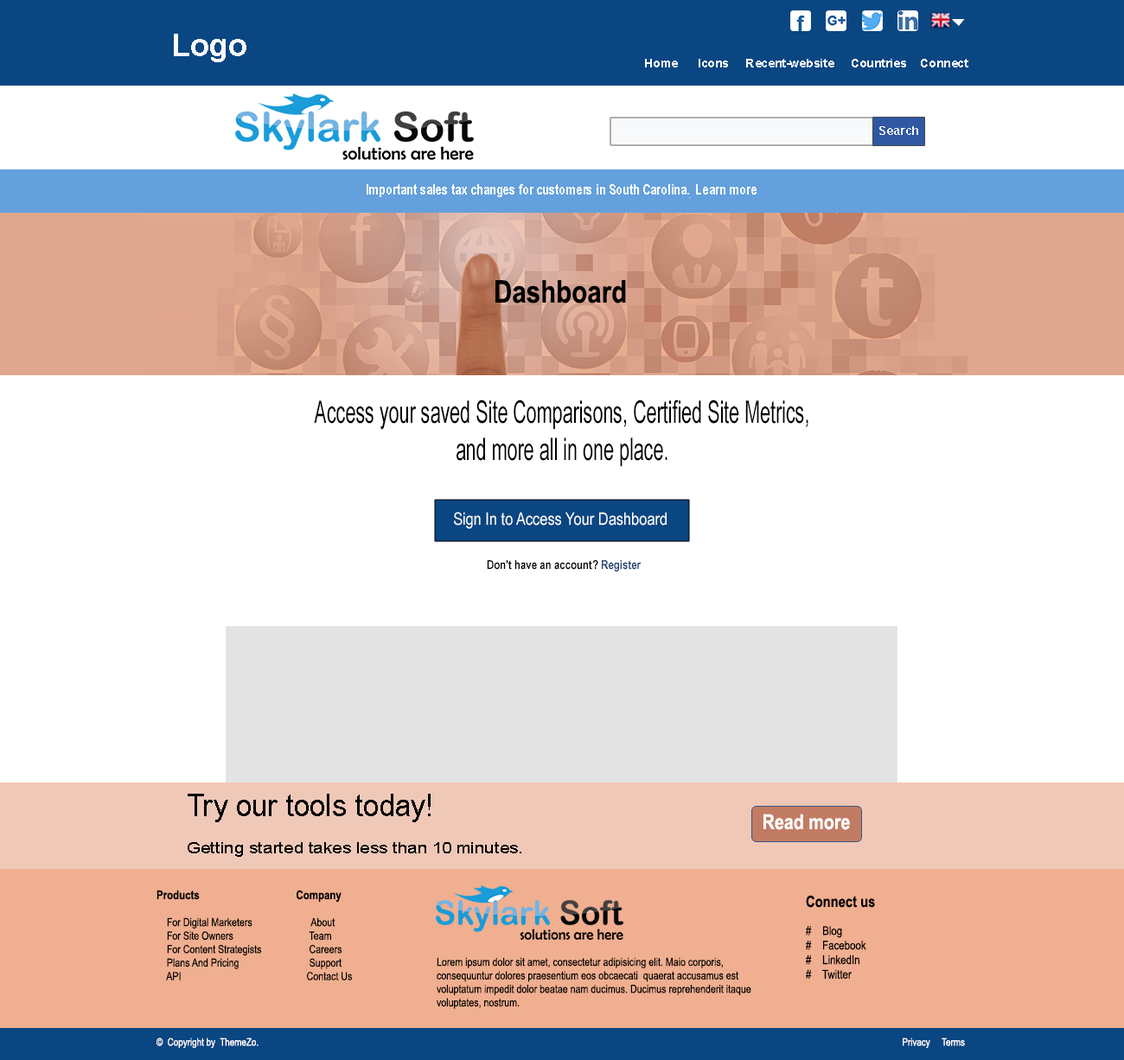
<style>
.page{position:relative;width:1124px;height:1060px;background:#ffffff}
.page>*{position:absolute;margin:0}
.t1{font:31.1px "Arial-BoldMT";color:#fcfdfd}
.t2{font:12px "Arial-BoldMT";color:#fcfdfd}
.t3{font:11.4px "Arial-BoldMT";color:#f7f9fa;scale:1.08 1}
.t4{font:31.1px "ArialNarrow-Bold";color:#000000}
.t5{font:31.1px "ArialNarrow";color:#000000;scale:0.73 1}
.t6{font:17.3px "ArialNarrow";color:#ffffff}
.t7{font:12.1px "ArialNarrow-Bold";color:#000000}
.t8{font:12.1px "ArialNarrow-Bold";color:#223f75}
.t9{font:15.6px "ArialMT";color:#000000;scale:1.14 1}
.t10{font:31.1px "ArialNarrow";color:#000000;scale:1.14 1}
.t11{font:20.8px "ArialNarrow-Bold";color:#ffffff}
.t12{font:11.2px "ArialNarrow";color:#000000}
.t13{font:12.1px "ArialNarrow";color:#000000}
.t14{font:15.6px "ArialNarrow-Bold";color:#000000}
.t15{font:11.3px "ArialNarrow";color:#010101}
.t16{font:10.4px "ArialNarrow";color:#ffffff}
</style>
<div class="page">
<p class="t1" style="left:174px;top:34px;width:73px;height:28px">Logo</p>
<p class="t2" style="left:645px;top:59px;width:324px;height:8px">Home      Icons     Recent-website     Countries    Connect</p>
<p class="t3" style="left:880px;top:126px;width:39px;height:9px">Search</p>
<p class="t4" style="left:496px;top:280px;width:130px;height:24px">Dashboard</p>
<p class="t5" style="left:314px;top:400px;width:495px;height:67px;text-align:center">Access your saved Site Comparisons, Certified Site Metrics,<br>and more all in one place.</p>
<p class="t6" style="left:454px;top:512px;width:213px;height:17px">Sign In to Access Your Dashboard</p>
<p class="t7" style="left:487px;top:560px;width:155px;height:12px">Don't have an account? <span class="t8">Register</span></p>
<p class="t9" style="left:188px;top:794px;width:334px;height:63px"><span class="t10">Try our tools today!<br></span><br>Getting started takes less than 10 minutes.</p>
<p class="t11" style="left:764px;top:814px;width:86px;height:16px">Read more</p>
<p class="t12" style="left:157px;top:890px;width:195px;height:91px"><span class="t7">Products                                   Company<br></span><br>    For Digital Marketers                       About<br>    For Site Owners             Team<br>    For Content Strategists            Careers<br>    Plans And Pricing             Support<br>    API              Contact Us</p>
<p class="t13" style="left:806px;top:895px;width:69px;height:84px"><span class="t14">Connect us<br><br></span>#    Blog<br>#    Facebook<br>#    LinkedIn<br>#    Twitter</p>
<p class="t15" style="left:437px;top:958px;width:315px;height:51px">Lorem ipsum dolor sit amet, consectetur adipisicing elit. Maio corporis, <br>consequuntur dolores praesentium eos obcaecati  quaerat accusamus est <br>voluptatum impedit dolor beatae nam ducimus. Ducimus reprehenderit itaque <br>voluptates, nostrum.</p>
<p class="t16" style="left:157px;top:1038px;width:808px;height:10px">©  Copyright by  ThemeZo.                                                                                                                                                                                                                                                                                Privacy     Terms</p>
</div>
